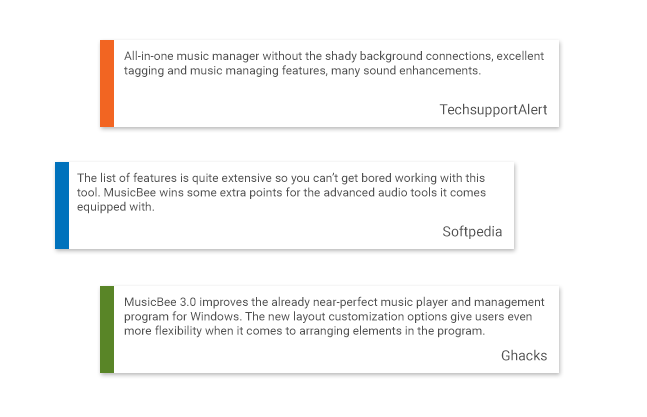
<style>
.page{position:relative;width:647px;height:417px;background:#ffffff}
.page>*{position:absolute;margin:0}
.t1{font:12px "Roboto-Regular";color:#505050}
.t2{font:14px "Roboto-Regular";color:#505050}
</style>
<div class="page">
<p class="t1" style="left:124px;top:50px;width:420px;height:27px">All-in-one music manager without the shady background connections, excellent tagging and music managing features, many sound enhancements.</p>
<p class="t2" style="left:439px;top:103px;width:108px;height:14px">TechsupportAlert</p>
<p class="t1" style="left:77px;top:172px;width:409px;height:42px">The list of features is quite extensive so you can’t get bored working with this tool. MusicBee wins some extra points for the advanced audio tools it comes equipped with.</p>
<p class="t2" style="left:443px;top:225px;width:59px;height:14px">Softpedia</p>
<p class="t1" style="left:124px;top:296px;width:421px;height:42px">MusicBee 3.0 improves the already near-perfect music player and management program for Windows. The new layout customization options give users even more flexibility when it comes to arranging elements in the program.</p>
<p class="t2" style="left:501px;top:349px;width:46px;height:12px">Ghacks</p>
</div>
